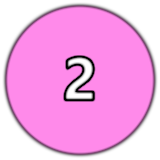
<style>
.page{position:relative;width:160px;height:160px;background:#ff8aea}
.page>*{position:absolute;margin:0}
.t1{font:60px "SegoeUI-Bold"}
</style>
<div class="page">
<p class="t1" style="left:65px;top:57px;width:29px;height:43px">2</p>
</div>
